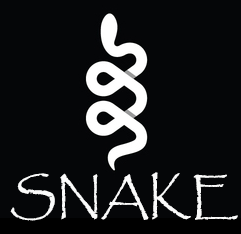
<style>
.page{position:relative;width:241px;height:234px;background:#050608}
.page>*{position:absolute;margin:0}
.t1{font:48px "Papyrus-Regular";color:#fbfbfb}
</style>
<div class="page">
<p class="t1" style="left:10px;top:172px;width:228px;height:49px">SNAKE</p>
</div>
